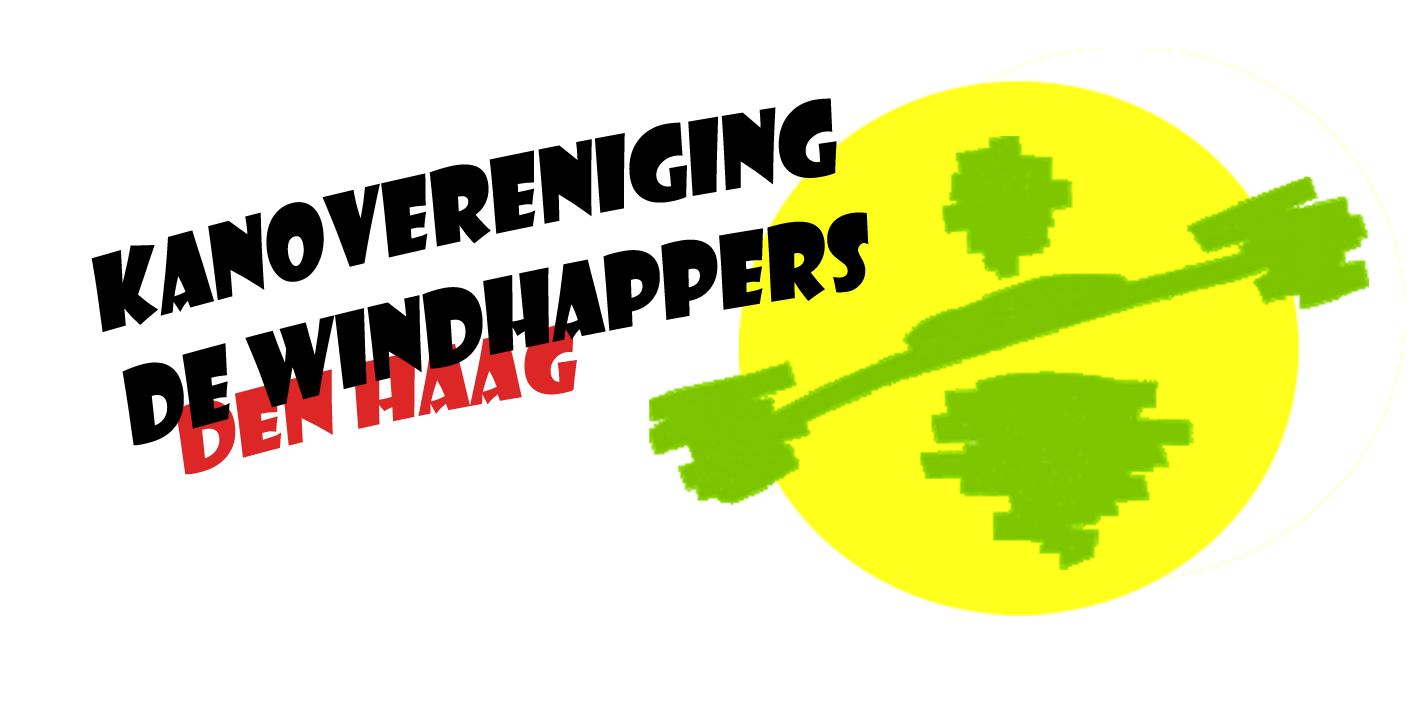
<style>
.page{position:relative;width:1417px;height:709px;background:#ffffff}
.page>*{position:absolute;margin:0}
.t1{font:97.9px "ShowcardGothic-Reg";color:#000000;font-style:italic;scale:0.89 1}
.t2{font:84.6px "ShowcardGothic-Reg";color:#dd2626;font-style:italic}
</style>
<div class="page">
<p class="t1" style="left:91px;top:98px;width:778px;height:348px;rotate:-12deg">Kanovereniging<br>de windhappers</p>
<p class="t2" style="left:176px;top:323px;width:401px;height:152px;rotate:-12deg">Den Haag</p>
</div>
